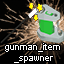
<style>
.page{position:relative;width:64px;height:64px;background:#000000}
.page>*{position:absolute;margin:0}
.t1{font:9px "ArialMT";color:#ffffff}
</style>
<div class="page">
<p class="t1" style="left:5px;top:43px;width:55px;height:20px;text-align:center">gunman_item<br>_spawner</p>
</div>
